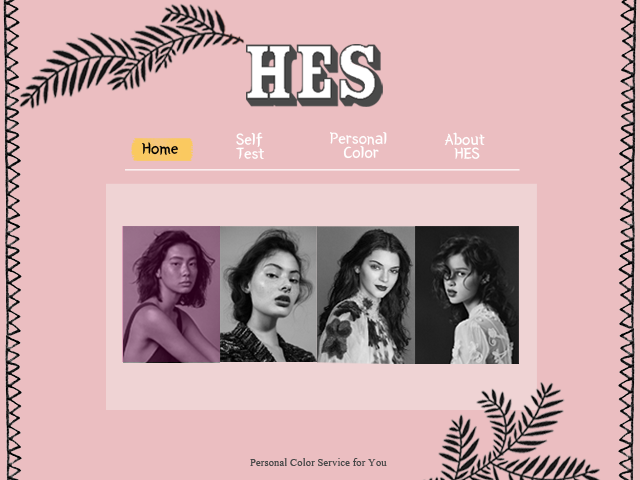
<style>
.page{position:relative;width:640px;height:480px;background:#ebbec1}
.page>*{position:absolute;margin:0}
.t1{font:16.9px/14px "BMYEONSUNG";color:#ffffff}
.t2{font:16.9px "BMYEONSUNG";color:#000000}
.t3{font:14.3px "Aparajita";color:#494949;scale:0.94 1}
</style>
<div class="page">
<p class="t1" style="left:236px;top:132px;width:28px;height:27px">Self<br>Test</p>
<p class="t1" style="left:330px;top:132px;width:57px;height:27px;text-align:center">Personal <br>Color</p>
<p class="t1" style="left:444px;top:132px;width:41px;height:27px;text-align:center">About <br>HES</p>
<p class="t2" style="left:142px;top:142px;width:36px;height:13px">Home</p>
<p class="t3" style="left:250px;top:458px;width:137px;height:8px">Personal Color Service for You</p>
</div>
